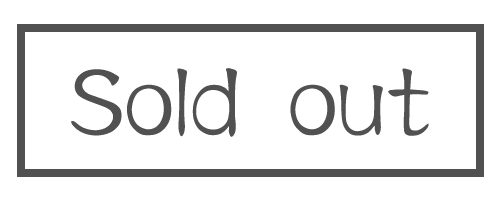
<style>
.page{position:relative;width:500px;height:200px;background:#ffffff}
.page>*{position:absolute;margin:0}
.t1{font:96px "HYc5gf";color:#515151}
</style>
<div class="page">
<p class="t1" style="left:71px;top:68px;width:358px;height:69px">Sold out</p>
</div>
